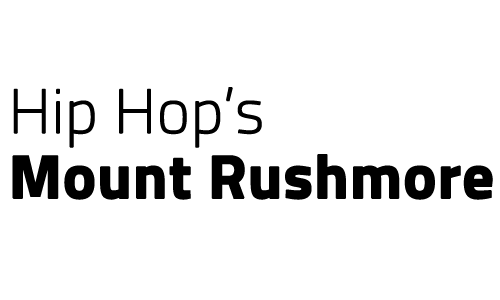
<style>
.page{position:relative;width:500px;height:300px;background:#ffffff}
.page>*{position:absolute;margin:0}
.t1{font:61.6px/65.2px "TitilliumWeb-Bold";color:#000000;font-weight:bold}
.t2{font:61.6px/65.2px "TitilliumWeb-Thin";color:#000000;font-weight:bold}
</style>
<div class="page">
<p class="t1" style="left:12px;top:87px;width:481px;height:113px"><span class="t2">Hip Hop’s <br></span>Mount Rushmore</p>
</div>
